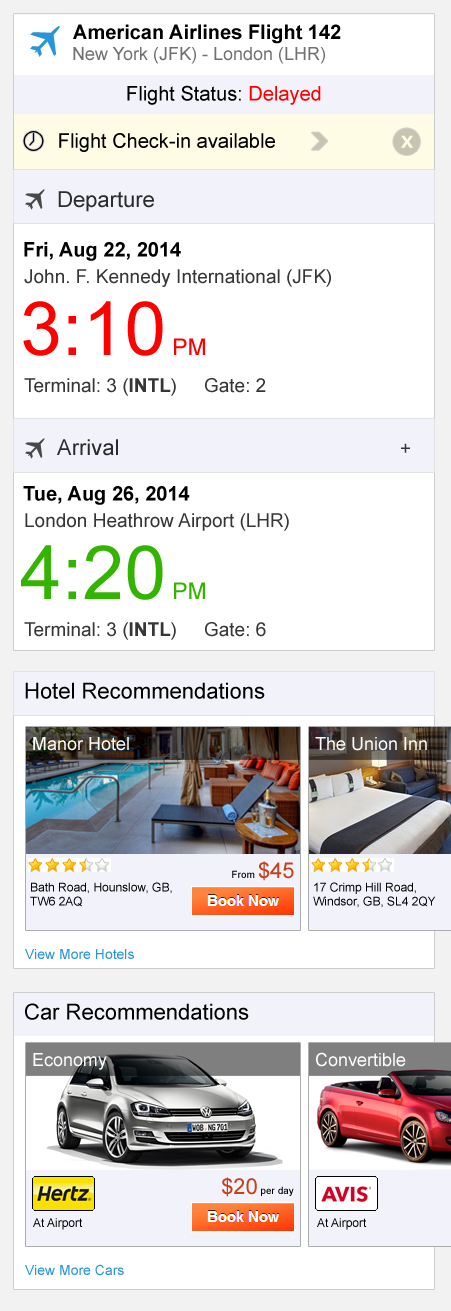
<style>
.page{position:relative;width:451px;height:1311px;background:#ffffff}
.page>*{position:absolute;margin:0}
.t1{font:20px "Arial-BoldMT";color:#000000}
.t2{font:18px "ArialMT";color:#707070}
.t3{font:20px "ArialMT";color:#000000}
.t4{font:20px "ArialMT";color:#ff0000}
.t5{font:24px "Consolas-Bold";color:#fffce5}
.t6{font:22px "ArialMT";color:#2c2c2e}
.t7{font:19px "ArialMT";color:#363636}
.t8{font:75px "ArialMT";color:#ff0000}
.t9{font:23px "ArialMT";color:#ff0000}
.t10{font:19px "Arial-BoldMT";color:#363636}
.t11{font:75px "ArialMT";color:#33b400}
.t12{font:23px "ArialMT";color:#33b400}
.t13{font:22px "ArialMT";color:#000000}
.t14{font:18px "ArialMT";color:#ffffff}
.t15{font:10px "ArialMT";color:#000000}
.t16{font:22px "ArialMT";color:#c7401b}
.t17{font:12px/14px "ArialMT";color:#000000}
.t18{font:14px "ArialMT";color:#2995d9}
.t19{font:12px "ArialMT";color:#000000}
</style>
<div class="page">
<p class="t1" style="left:73px;top:24px;width:268px;height:20px">American Airlines Flight 142</p>
<p class="t2" style="left:73px;top:47px;width:252px;height:17px">New York (JFK) - London (LHR)</p>
<p class="t3" style="left:127px;top:85px;width:194px;height:20px">Flight Status: <span class="t4">Delayed</span></p>
<p class="t3" style="left:59px;top:133px;width:216px;height:19px">Flight Check-in available</p>
<p class="t5" style="left:401px;top:135px;width:13px;height:13px">x</p>
<p class="t6" style="left:58px;top:191px;width:96px;height:21px">Departure</p>
<p class="t1" style="left:24px;top:242px;width:157px;height:19px">Fri, Aug 22, 2014</p>
<p class="t7" style="left:24px;top:269px;width:307px;height:18px">John. F. Kennedy International (JFK)</p>
<p class="t8" style="left:23px;top:301px;width:182px;height:55px">3:10<span class="t9"> PM</span></p>
<p class="t7" style="left:24px;top:378px;width:242px;height:18px">Terminal: 3 (<span class="t10">INTL</span>) Gate: 2</p>
<p class="t6" style="left:57px;top:439px;width:61px;height:17px">Arrival</p>
<p class="t7" style="left:401px;top:443px;width:9px;height:10px">+</p>
<p class="t1" style="left:23px;top:486px;width:167px;height:19px">Tue, Aug 26, 2014</p>
<p class="t7" style="left:25px;top:513px;width:264px;height:18px">London Heathrow Airport (LHR)</p>
<p class="t11" style="left:21px;top:545px;width:184px;height:55px">4:20<span class="t12"> PM</span></p>
<p class="t7" style="left:24px;top:622px;width:242px;height:18px">Terminal: 3 (<span class="t10">INTL</span>) Gate: 6</p>
<p class="t13" style="left:25px;top:682px;width:240px;height:17px">Hotel Recommendations</p>
<p class="t14" style="left:33px;top:737px;width:96px;height:14px">Manor Hotel</p>
<p class="t14" style="left:315px;top:737px;width:112px;height:14px">The Union Inn</p>
<p class="t15" style="left:232px;top:861px;width:62px;height:20px">From <span class="t16">$45</span></p>
<p class="t17" style="left:30px;top:882px;width:142px;height:25px">Bath Road, Hounslow, GB, TW6 2AQ</p>
<p class="t17" style="left:313px;top:882px;width:123px;height:26px">17 Crimp Hill Road, Windsor, GB, SL4 2QY</p>
<p class="t18" style="left:25px;top:949px;width:109px;height:10px">View More Hotels</p>
<p class="t13" style="left:25px;top:1003px;width:224px;height:17px">Car Recommendations</p>
<p class="t14" style="left:33px;top:1053px;width:74px;height:17px">Economy</p>
<p class="t14" style="left:316px;top:1052px;width:90px;height:15px">Convertible</p>
<p class="t15" style="left:222px;top:1177px;width:72px;height:20px"><span class="t16">$20</span> per day</p>
<p class="t19" style="left:33px;top:1218px;width:50px;height:12px">At Airport</p>
<p class="t19" style="left:317px;top:1218px;width:50px;height:12px">At Airport</p>
<p class="t18" style="left:25px;top:1264px;width:99px;height:12px">View More Cars</p>
</div>
